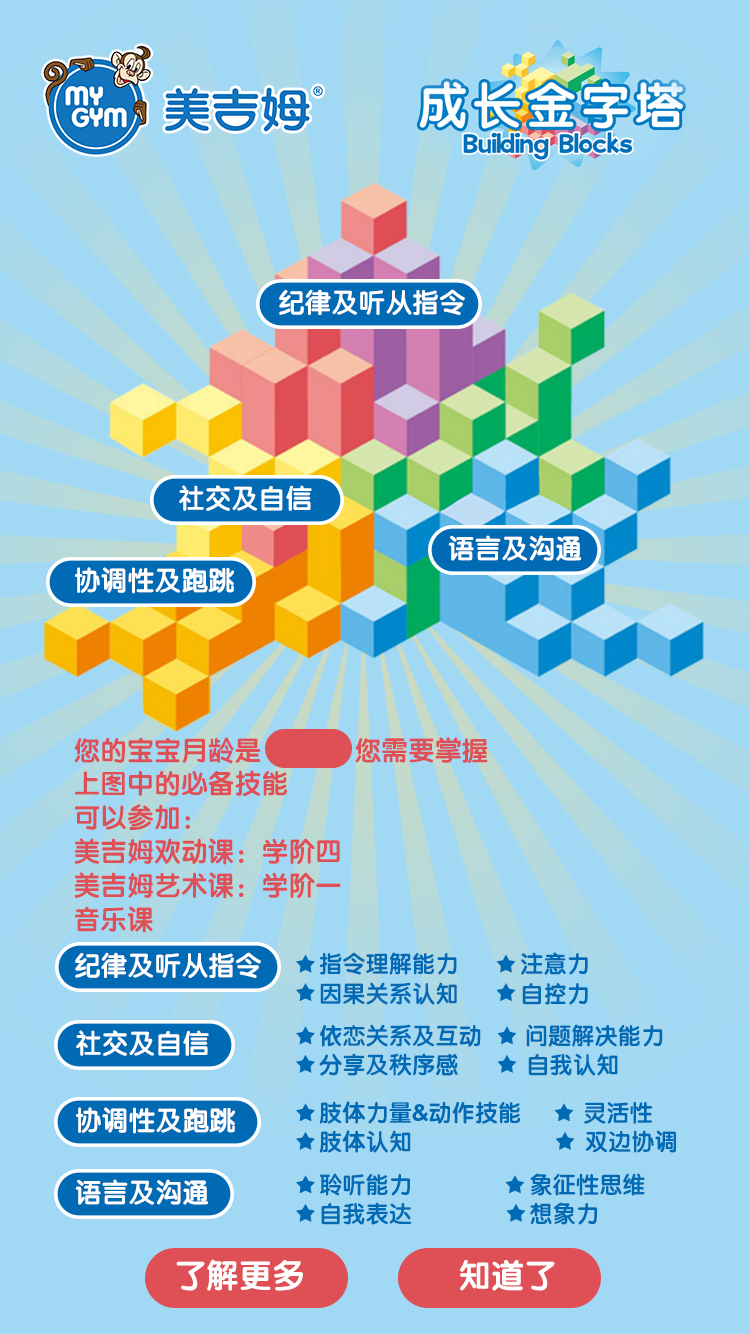
<style>
.page{position:relative;width:750px;height:1334px;background:#a1d9f5}
.page>*{position:absolute;margin:0}
.t1{font:27.2px "FZY4JW--GB1-0";color:#ffffff}
.t2{font:27.2px/39.4px "FZY4JW--GB1-0";color:#df4f56}
.t3{font:23.5px/34px "FZY4JW--GB1-0";color:#006ab4}
.t4{font:33px "FZY4JW--GB1-0";color:#ffffff}
</style>
<div class="page">
<p class="t1" style="left:279px;top:289px;width:186px;height:26px">纪律及听从指令</p>
<p class="t1" style="left:179px;top:485px;width:133px;height:26px">社交及自信</p>
<p class="t1" style="left:448px;top:535px;width:133px;height:26px">语言及沟通</p>
<p class="t1" style="left:75px;top:567px;width:160px;height:27px">协调性及跑跳</p>
<p class="t2" style="left:74px;top:737px;width:414px;height:196px">您的宝宝月龄是             您需要掌握<br>上图中的必备技能<br>可以参加：<br>美吉姆欢动课：学阶四<br>美吉姆艺术课：学阶一<br>音乐课</p>
<p class="t1" style="left:75px;top:952px;width:186px;height:26px">纪律及听从指令</p>
<p class="t3" style="left:319px;top:952px;width:269px;height:53px">指令理解能力          注意力<br>因果关系认知          自控力</p>
<p class="t3" style="left:319px;top:1024px;width:344px;height:52px">依恋关系及互动       问题解决能力<br>分享及秩序感           自我认知</p>
<p class="t1" style="left:76px;top:1030px;width:133px;height:26px">社交及自信</p>
<p class="t1" style="left:76px;top:1107px;width:160px;height:27px">协调性及跑跳</p>
<p class="t3" style="left:319px;top:1101px;width:357px;height:52px">肢体力量&amp;动作技能          灵活性<br>肢体认知                            双边协调</p>
<p class="t1" style="left:75px;top:1179px;width:133px;height:26px">语言及沟通</p>
<p class="t3" style="left:320px;top:1173px;width:325px;height:52px">聆听能力                   象征性思维<br>自我表达                   想象力</p>
<p class="t4" style="left:176px;top:1259px;width:127px;height:32px">了解更多</p>
<p class="t4" style="left:460px;top:1260px;width:95px;height:31px">知道了</p>
</div>
